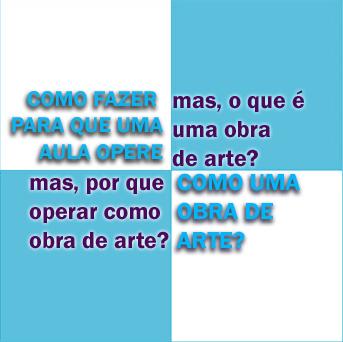
<style>
.page{position:relative;width:343px;height:342px;background:#ffffff}
.page>*{position:absolute;margin:0}
.t1{font:22px "FranklinGothic-Demi";color:#12b2ed}
.t2{font:24px "FranklinGothic-Demi";color:#490a5e}
.t3{font:24px "FranklinGothic-Demi";color:#05b5f7}
</style>
<div class="page">
<p class="t1" style="left:12px;top:91px;width:151px;height:69px;text-align:right">COMO FAZER <br>PARA QUE UMA<br>AULA OPERE</p>
<p class="t2" style="left:172px;top:90px;width:132px;height:77px">mas, o que é<br>uma obra <br>de arte?</p>
<p class="t3" style="left:177px;top:173px;width:123px;height:75px">COMO UMA<br>OBRA DE <br>ARTE?</p>
<p class="t2" style="left:29px;top:178px;width:140px;height:71px">mas, por que<br>operar como<br>obra de arte?</p>
</div>
